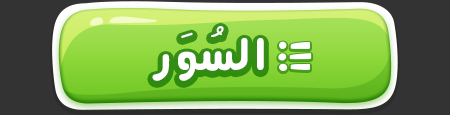
<style>
.page{position:relative;width:450px;height:115px;background:#333333}
.page>*{position:absolute;margin:0}
.t1{font:48px "ANegaar-Bold";letter-spacing:0.05em;color:#ffffff}
</style>
<div class="page">
<p class="t1" style="left:152px;top:26px;width:112px;height:55px">السُوَر</p>
</div>
